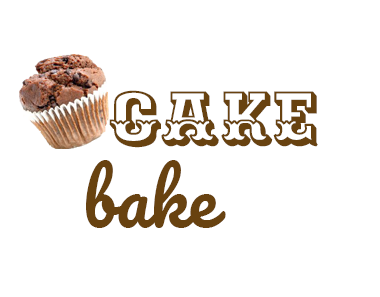
<style>
.page{position:relative;width:380px;height:297px;background:#ffffff}
.page>*{position:absolute;margin:0}
.t1{font:72px "Ewert-Regular";color:#684210}
.t2{font:36px "Ewert-Regular";color:#e3f3f5}
.t3{font:72px "Pacifico-Regular";color:#684210}
</style>
<div class="page">
<p class="t1" style="left:86px;top:90px;width:232px;height:138px;text-align:center"><span class="t2">                 </span>cake<span class="t3"><br>      bake</span></p>
</div>
